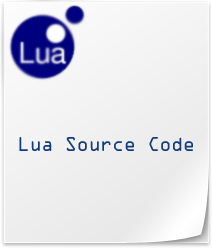
<style>
.page{position:relative;width:212px;height:248px}
.page>*{position:absolute;margin:0}
.t1{font:18px "OCRAStd";letter-spacing:-0.025em;color:#123c7c;scale:0.94 1}
</style>
<div class="page">
<p class="t1" style="left:19px;top:137px;width:174px;height:14px">Lua Source Code</p>
</div>
